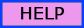
<style>
.page{position:relative;width:84px;height:28px;background:#ee98ed}
.page>*{position:absolute;margin:0}
.t1{font:17px "Verdana";color:#000000;font-weight:bold}
</style>
<div class="page">
<p class="t1" style="left:21px;top:7px;width:44px;height:13px">HELP</p>
</div>
